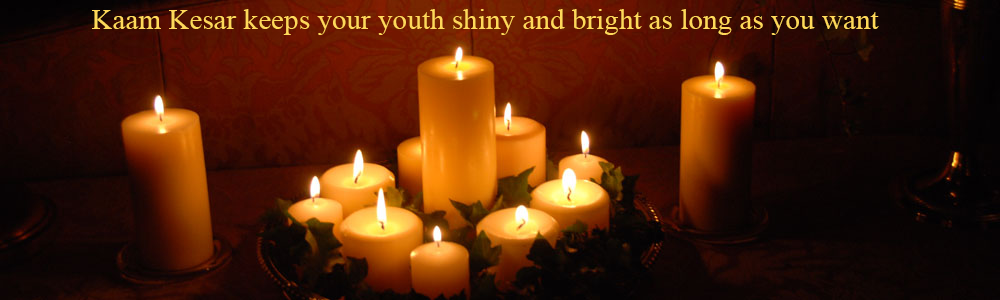
<style>
.page{position:relative;width:1000px;height:300px}
.page>*{position:absolute;margin:0}
.t1{font:29.2px "TimesNewRomanPSMT";color:#fed85a}
</style>
<div class="page">
<p class="t1" style="left:92px;top:9px;width:787px;height:26px">Kaam Kesar keeps your youth shiny and bright as long as you want</p>
</div>
